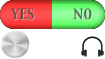
<style>
.page{position:relative;width:105px;height:59px;background:#ffffff}
.page>*{position:absolute;margin:0}
.t1{font:12.9px "CapitalsRegular"}
.t2{font:12.9px "CapitalsRegular";color:#715151}
.t3{font:12.9px "CapitalsRegular";color:#5a715c}
</style>
<div class="page">
<p class="t1" style="left:11px;top:9px;width:24px;height:12px">YES</p>
<p class="t2" style="left:11px;top:8px;width:23px;height:12px">YES</p>
<p class="t3" style="left:73px;top:8px;width:19px;height:12px">NO</p>
<p class="t1" style="left:74px;top:9px;width:19px;height:12px">NO</p>
</div>
